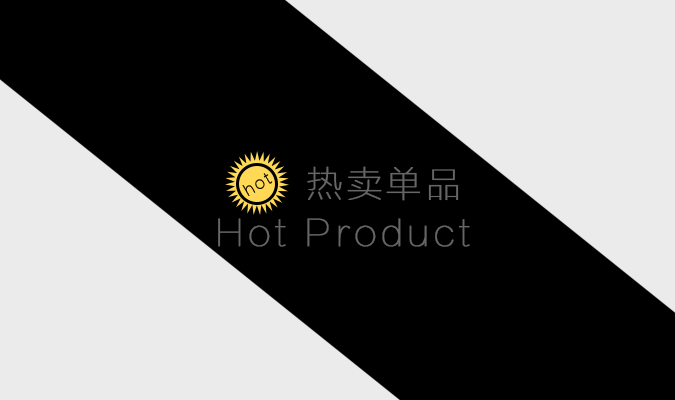
<style>
.page{position:relative;width:675px;height:400px;background:#000000}
.page>*{position:absolute;margin:0}
.t1{font:36px "FZLTCXHJW--GB1-0";letter-spacing:0.075em;color:#676666;font-weight:bold}
</style>
<div class="page">
<p class="t1" style="left:307px;top:166px;width:152px;height:35px">热卖单品</p>
<p class="t1" style="left:218px;top:218px;width:252px;height:29px">Hot Product</p>
</div>
